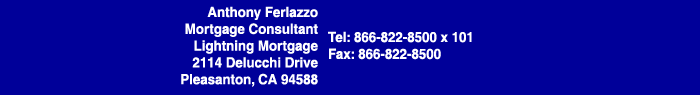
<style>
.page{position:relative;width:700px;height:95px;background:#000099}
.page>*{position:absolute;margin:0}
.t1{font:14px "Helvetica-Bold";color:#ffffff;scale:0.95 1}
</style>
<div class="page">
<p class="t1" style="left:181px;top:6px;width:137px;height:81px;text-align:right">Anthony Ferlazzo<br>Mortgage Consultant<br>Lightning Mortgage<br>2114 Delucchi Drive<br>Pleasanton, CA 94588</p>
<p class="t1" style="left:328px;top:31px;width:144px;height:29px">Tel: 866-822-8500 x 101<br>Fax: 866-822-8500</p>
</div>
